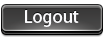
<style>
.page{position:relative;width:104px;height:40px;background:#ffffff}
.page>*{position:absolute;margin:0}
.t1{font:16.9px "AdobeHeitiStd-Regular";color:#fafafc}
</style>
<div class="page">
<p class="t1" style="left:25px;top:10px;width:54px;height:17px">Logout</p>
</div>
